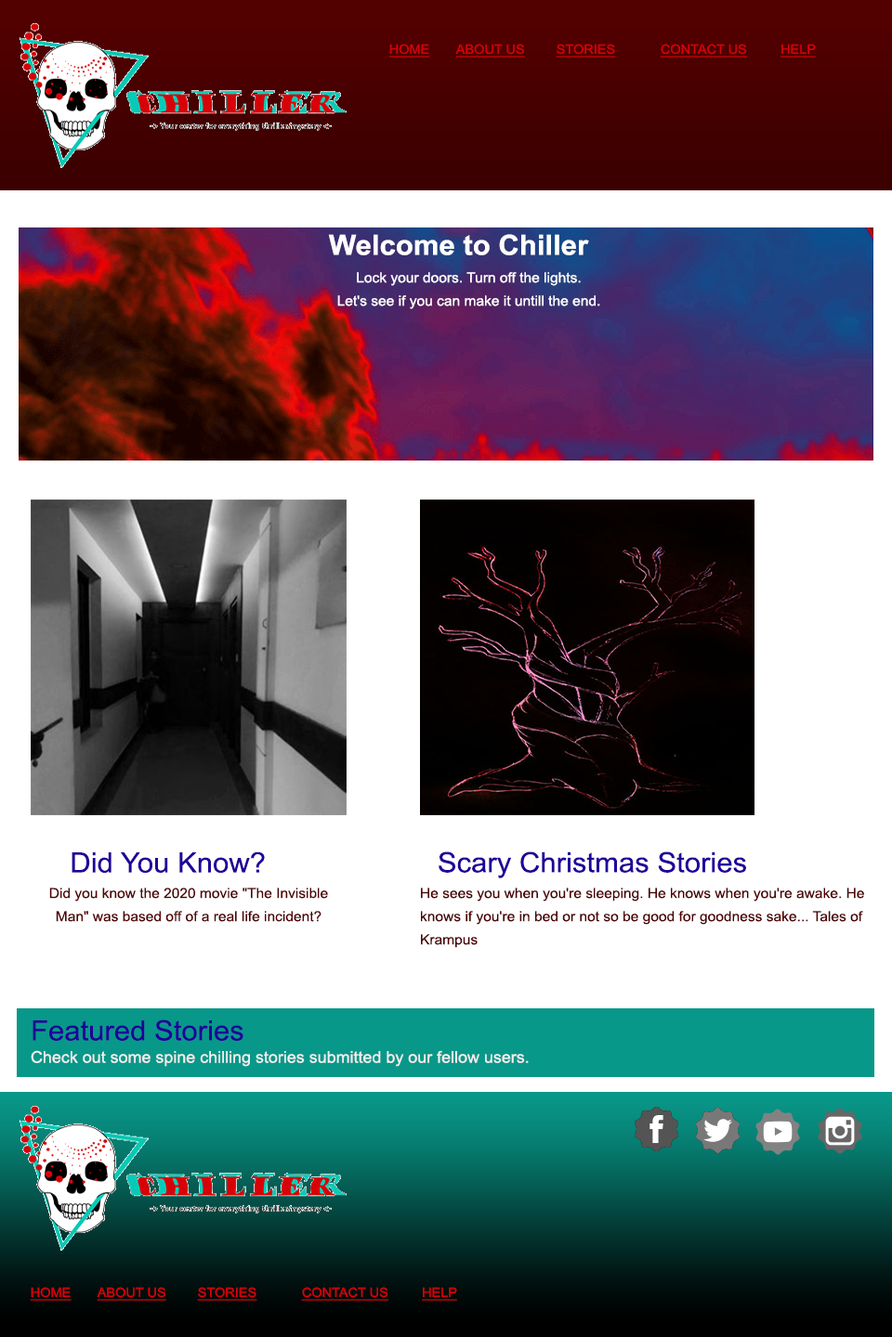
<style>
.page{position:relative;width:892px;height:1337px;background:#ffffff}
.page>*{position:absolute;margin:0}
.t1{font:13px "ArialMT";color:#d60208;text-decoration:underline;scale:1.04 1}
.t2{font:27.9px "Arial-BoldMT";color:#ffffff;scale:1.04 1}
.t3{font:13.9px/23.2px "ArialMT";color:#ffffff;scale:1.04 1}
.t4{font:27.9px "ArialMT";color:#200099;scale:1.04 1}
.t5{font:13.9px/23.2px "ArialMT";color:#520000;scale:1.03 1}
.t6{font:13.9px/23.2px "ArialMT";color:#4f0000;scale:1.04 1}
.t7{font:16.1px "ArialMT";color:#f0f0f0;scale:1.04 1}
</style>
<div class="page">
<p class="t1" style="left:388px;top:44px;width:427px;height:14px">HOME ABOUT US STORIES CONTACT US         HELP</p>
<p class="t2" style="left:328px;top:234px;width:261px;height:21px">Welcome to Chiller</p>
<p class="t3" style="left:337px;top:272px;width:263px;height:37px;text-align:center">Lock your doors. Turn off the lights.<br>Let's see if you can make it untill the end.</p>
<p class="t4" style="left:72px;top:852px;width:193px;height:21px">Did You Know?</p>
<p class="t4" style="left:438px;top:852px;width:308px;height:27px">Scary Christmas Stories</p>
<p class="t5" style="left:49px;top:888px;width:279px;height:34px;text-align:center">Did you know the 2020 movie "The Invisible Man" was based off of a real life incident?</p>
<p class="t6" style="left:421px;top:888px;width:443px;height:60px">He sees you when you're sleeping. He knows when you're awake. He knows if you're in bed or not so be good for goodness sake... Tales of Krampus</p>
<p class="t4" style="left:33px;top:1020px;width:210px;height:21px">Featured Stories</p>
<p class="t7" style="left:31px;top:1050px;width:497px;height:17px">Check out some spine chilling stories submitted by our fellow users.</p>
<p class="t1" style="left:30px;top:1287px;width:427px;height:14px">HOME ABOUT US STORIES CONTACT US         HELP</p>
</div>
